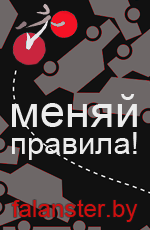
<style>
.page{position:relative;width:150px;height:230px;background:#111111}
.page>*{position:absolute;margin:0}
.t1{font:45.2px "ArialMT";color:#ececec}
.t2{font:31.1px "ArialMT";color:#ececec}
.t3{font:24.3px "ArialMT";color:#cf0f0f}
</style>
<div class="page">
<p class="t1" style="left:12px;top:94px;width:125px;height:33px">меняй</p>
<p class="t2" style="left:12px;top:132px;width:125px;height:28px">правила!</p>
<p class="t3" style="left:12px;top:199px;width:126px;height:23px">falanster.by</p>
</div>
